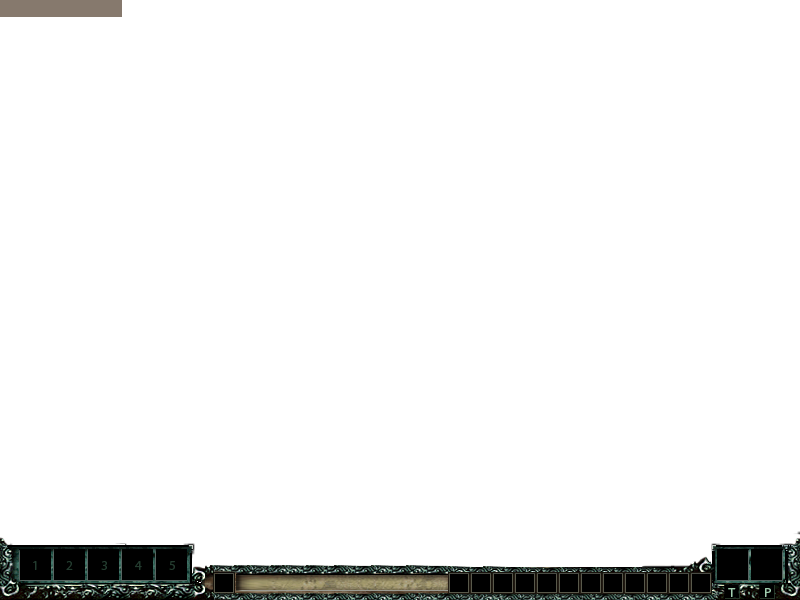
<style>
.page{position:relative;width:800px;height:600px;background:#ffffff}
.page>*{position:absolute;margin:0}
.t1{font:13.3px "MyriadPro-Regular";color:#243b2f}
.t2{font:13.3px "MyriadPro-Regular";color:#a2ceb0}
</style>
<div class="page">
<p class="t1" style="left:33px;top:561px;width:4px;height:9px">1</p>
<p class="t1" style="left:66px;top:561px;width:7px;height:9px">2</p>
<p class="t1" style="left:101px;top:561px;width:6px;height:9px">3</p>
<p class="t1" style="left:135px;top:561px;width:7px;height:9px">4</p>
<p class="t1" style="left:169px;top:561px;width:6px;height:9px">5</p>
<p class="t2" style="left:728px;top:588px;width:8px;height:9px">T</p>
<p class="t2" style="left:765px;top:588px;width:6px;height:9px">P</p>
</div>
